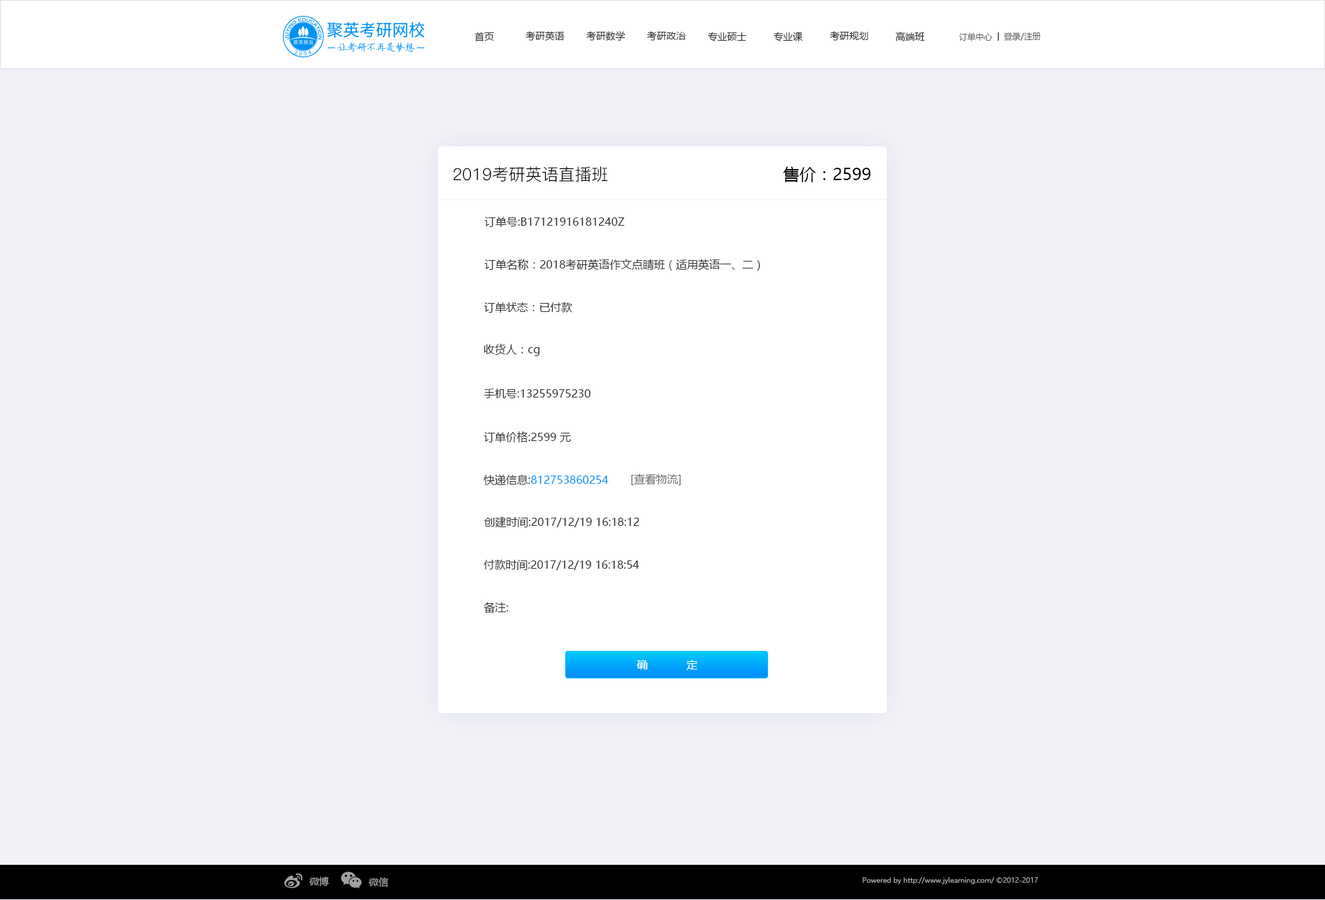
<style>
.page{position:relative;width:1325px;height:900px;background:#f2f1f6}
.page>*{position:absolute;margin:0}
.t1{font:9.7px "MicrosoftYaHei";color:#333333}
.t2{font:8.3px "MicrosoftYaHei";color:#666666}
.t3{font:16.6px "PingFang-SC-Regular";color:#000000}
.t4{font:16.6px "MicrosoftYaHei";color:#000000}
.t5{font:11px "MicrosoftYaHei";color:#333333}
.t6{font:11px "MicrosoftYaHei";color:#666666}
.t7{font:11px "MicrosoftYaHei";color:#0092f5}
.t8{font:11px "MicrosoftYaHei";color:#ffffff}
.t9{font:9.7px "MicrosoftYaHei";color:#a1a1a1}
.t10{font:6.9px "MicrosoftYaHei";color:#a1a1a1}
</style>
<div class="page">
<p class="t1" style="left:475px;top:32px;width:19px;height:9px">首页</p>
<p class="t1" style="left:525px;top:31px;width:40px;height:10px">考研英语</p>
<p class="t1" style="left:586px;top:31px;width:39px;height:10px">考研数学</p>
<p class="t1" style="left:647px;top:31px;width:39px;height:10px">考研政治</p>
<p class="t1" style="left:708px;top:32px;width:39px;height:9px">专业硕士</p>
<p class="t1" style="left:774px;top:32px;width:29px;height:9px">专业课</p>
<p class="t1" style="left:830px;top:31px;width:38px;height:10px">考研规划</p>
<p class="t1" style="left:895px;top:32px;width:30px;height:9px">高端班</p>
<p class="t2" style="left:959px;top:32px;width:33px;height:9px">订单中心</p>
<p class="t2" style="left:1003px;top:32px;width:38px;height:9px">登录/注册</p>
<p class="t3" style="left:453px;top:166px;width:155px;height:16px">2019考研英语直播班</p>
<p class="t4" style="left:783px;top:166px;width:88px;height:16px">售价：2599</p>
<p class="t5" style="left:484px;top:217px;width:141px;height:10px">订单号:B17121916181240Z</p>
<p class="t5" style="left:484px;top:259px;width:277px;height:12px">订单名称：2018考研英语作文点睛班（适用英语一、二）</p>
<p class="t5" style="left:484px;top:302px;width:88px;height:11px">订单状态：已付款</p>
<p class="t5" style="left:484px;top:344px;width:56px;height:12px">收货人：cg</p>
<p class="t5" style="left:484px;top:389px;width:107px;height:9px">手机号:13255975230</p>
<p class="t5" style="left:484px;top:431px;width:87px;height:11px">订单价格:2599 元</p>
<p class="t6" style="left:631px;top:473px;width:50px;height:12px">[查看物流]</p>
<p class="t7" style="left:484px;top:474px;width:125px;height:11px"><span class="t5">快递信息:</span>812753860254</p>
<p class="t5" style="left:484px;top:516px;width:156px;height:12px">创建时间:2017/12/19 16:18:12</p>
<p class="t5" style="left:484px;top:559px;width:155px;height:11px">付款时间:2017/12/19 16:18:54</p>
<p class="t5" style="left:484px;top:602px;width:25px;height:12px">备注:</p>
<p class="t8" style="left:636px;top:660px;width:62px;height:10px">确  定</p>
<p class="t9" style="left:309px;top:876px;width:20px;height:10px">微博</p>
<p class="t9" style="left:369px;top:877px;width:20px;height:10px">微信</p>
<p class="t10" style="left:863px;top:877px;width:175px;height:7px">Powered by http://www.jylearning.com/ ©2012-2017</p>
</div>
